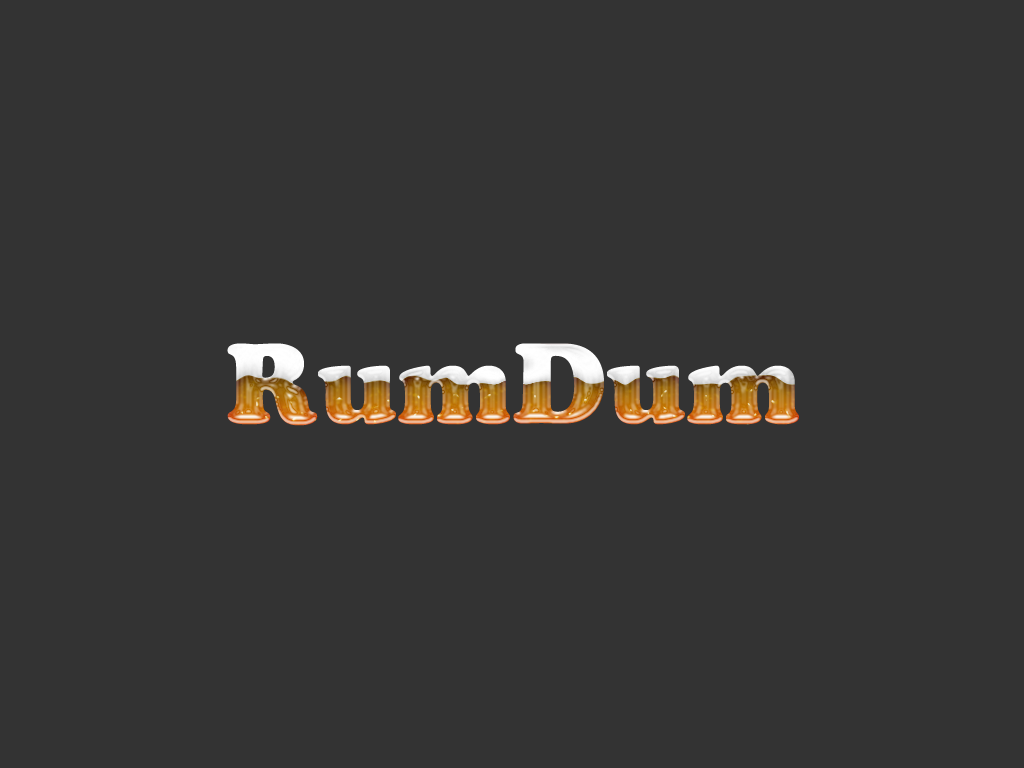
<style>
.page{position:relative;width:1024px;height:768px;background:#333333}
.page>*{position:absolute;margin:0}
.t1{font:112.5px "CooperBlackStd"}
</style>
<div class="page">
<p class="t1" style="left:227px;top:343px;width:572px;height:83px">RumDum</p>
</div>
